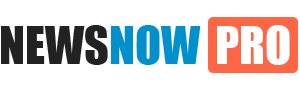
<style>
.page{position:relative;width:300px;height:90px;background:#ffffff}
.page>*{position:absolute;margin:0}
.t1{font:48px "Impact";color:#222222}
.t2{font:48px "Impact";color:#0091cd}
.t3{font:48px "Impact";color:#ffffff}
</style>
<div class="page">
<p class="t1" style="left:1px;top:25px;width:200px;height:40px">NEWS<span class="t2">NOW</span></p>
<p class="t3" style="left:217px;top:25px;width:73px;height:40px">PRO</p>
</div>
